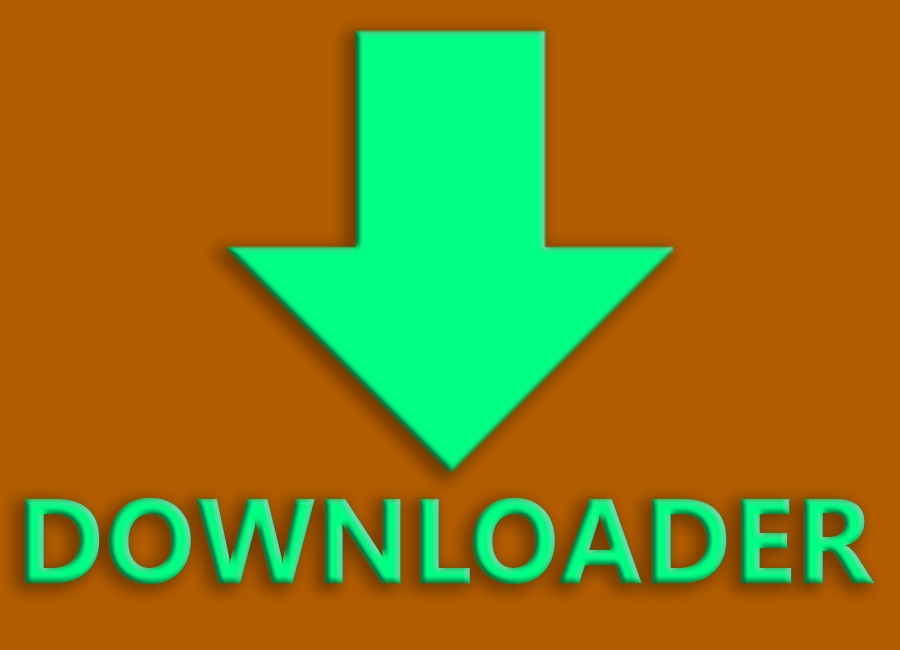
<style>
.page{position:relative;width:900px;height:650px;background:#b25c00}
.page>*{position:absolute;margin:0}
.t1{font:120px "SegoeUI-Bold"}
</style>
<div class="page">
<p class="t1" style="left:24px;top:498px;width:851px;height:86px">DOWNLOADER</p>
</div>
